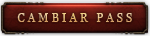
<style>
.page{position:relative;width:150px;height:36px}
.page>*{position:absolute;margin:0}
.t1{font:11.5px "Georgia";letter-spacing:0.25em;text-transform:uppercase}
</style>
<div class="page">
<p class="t1" style="left:17px;top:14px;width:115px;height:9px">CAMBIAR PASS</p>
<p class="t1" style="left:17px;top:13px;width:115px;height:9px">CAMBIAR PASS</p>
<p class="t1" style="left:17px;top:13px;width:115px;height:9px">CAMBIAR PASS</p>
<p class="t1" style="left:17px;top:13px;width:115px;height:9px">CAMBIAR PASS</p>
</div>
